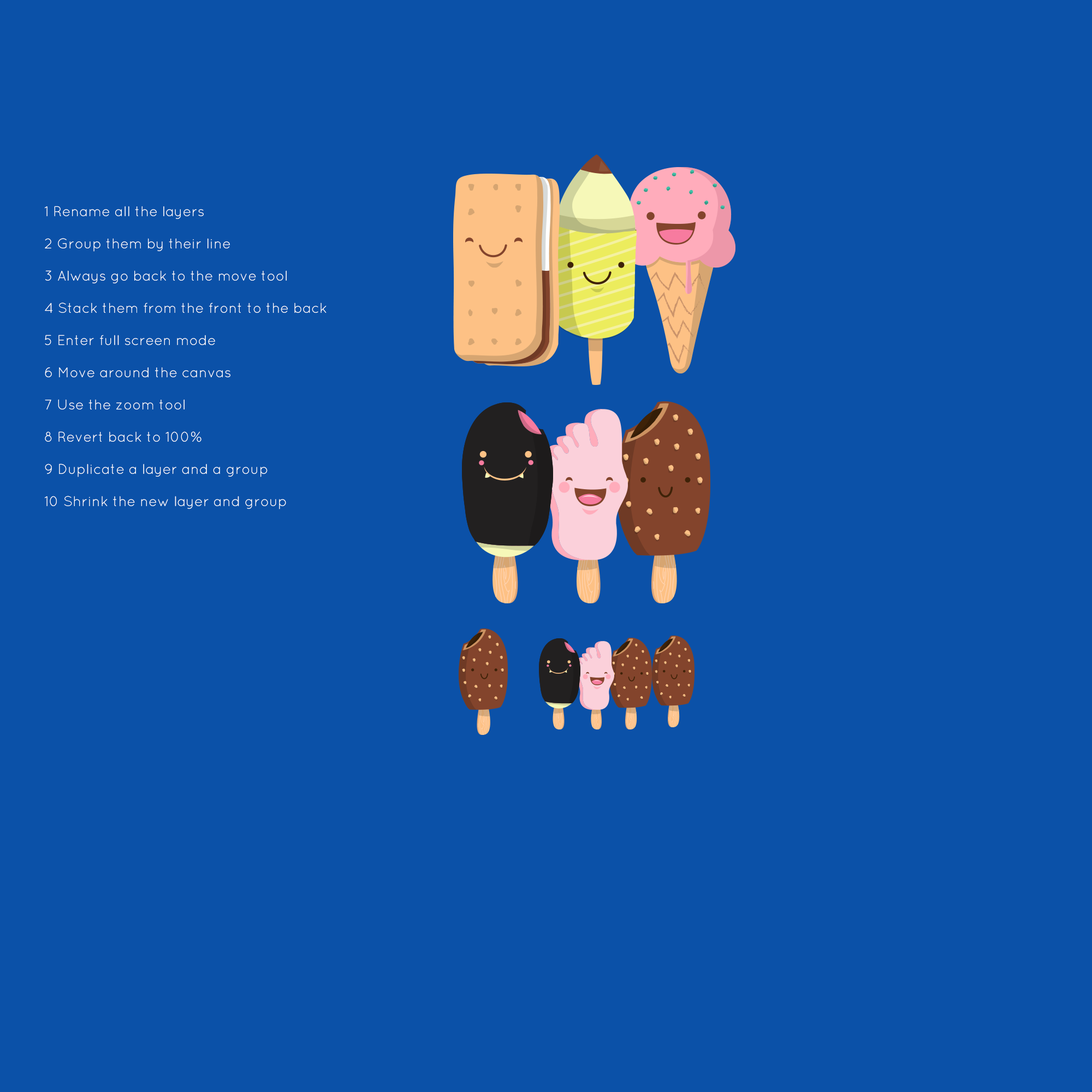
<style>
.page{position:relative;width:1092px;height:1092px;background:#0b51a8}
.page>*{position:absolute;margin:0}
.t1{font:14.2px/32.2px "Quicksand-Regular";color:#ffffff}
</style>
<div class="page">
<p class="t1" style="left:44px;top:206px;width:283px;height:303px">1 Rename all the layers<br>2 Group them by their line<br>3 Always go back to the move tool<br>4 Stack them from the front to the back<br>5 Enter full screen mode<br>6 Move around the canvas<br>7 Use the zoom tool<br>8 Revert back to 100%<br>9 Duplicate a layer and a group<br>10 Shrink the new layer and group</p>
</div>
